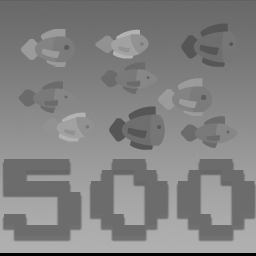
<style>
.page{position:relative;width:256px;height:256px}
.page>*{position:absolute;margin:0}
.t1{font:87.2px "PressStart2P-Regular";color:#6c6c6c}
</style>
<div class="page">
<p class="t1" style="left:4px;top:159px;width:251px;height:77px">500</p>
</div>
